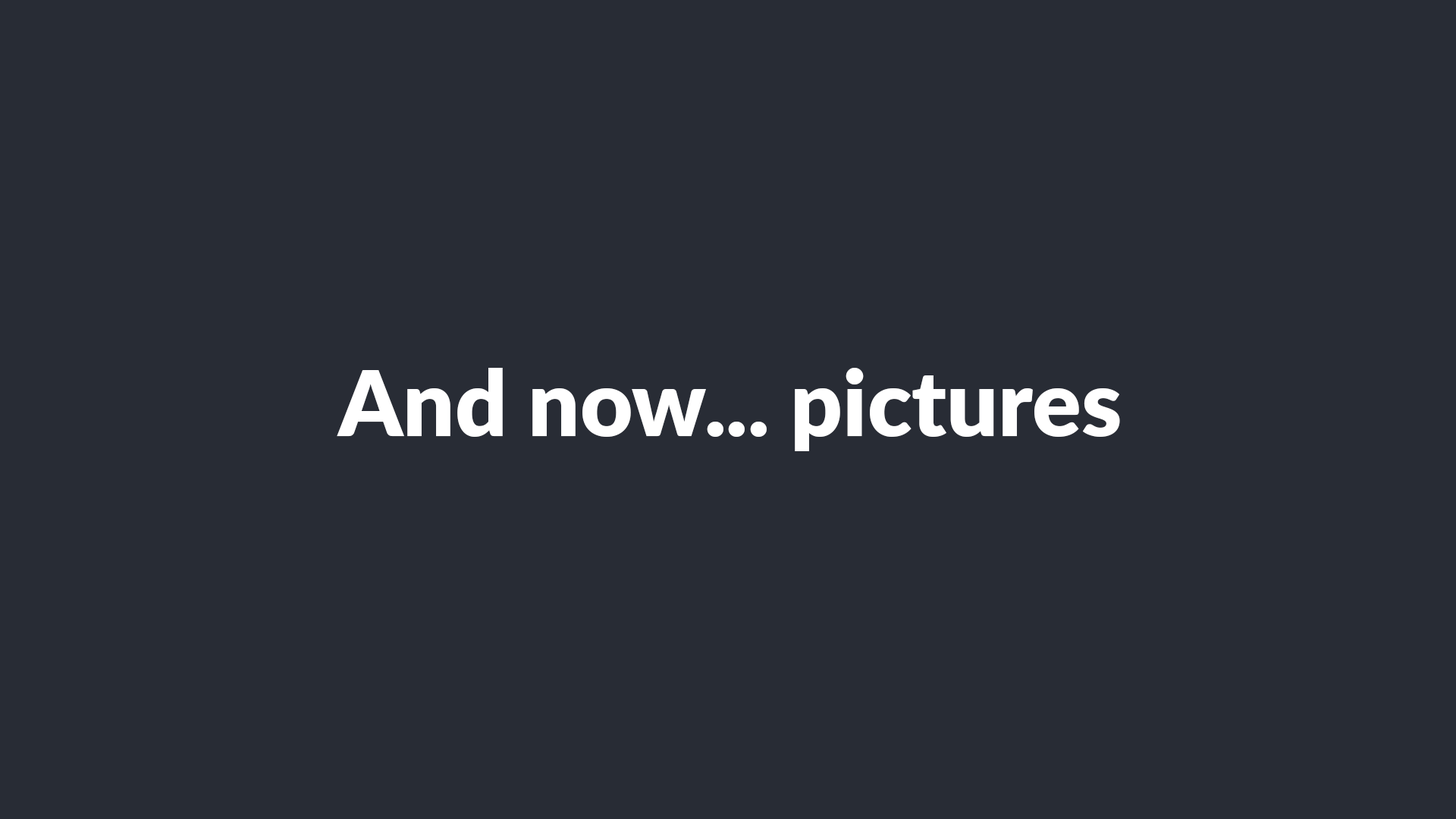
<style>
.page{position:relative;width:1456px;height:819px;background:#282c35}
.page>*{position:absolute;margin:0}
.t1{font:91px "Lato-ExtraBold";color:#ffffff}
</style>
<div class="page">
<p class="t1" style="left:337px;top:368px;width:783px;height:83px">And now... pictures</p>
</div>
